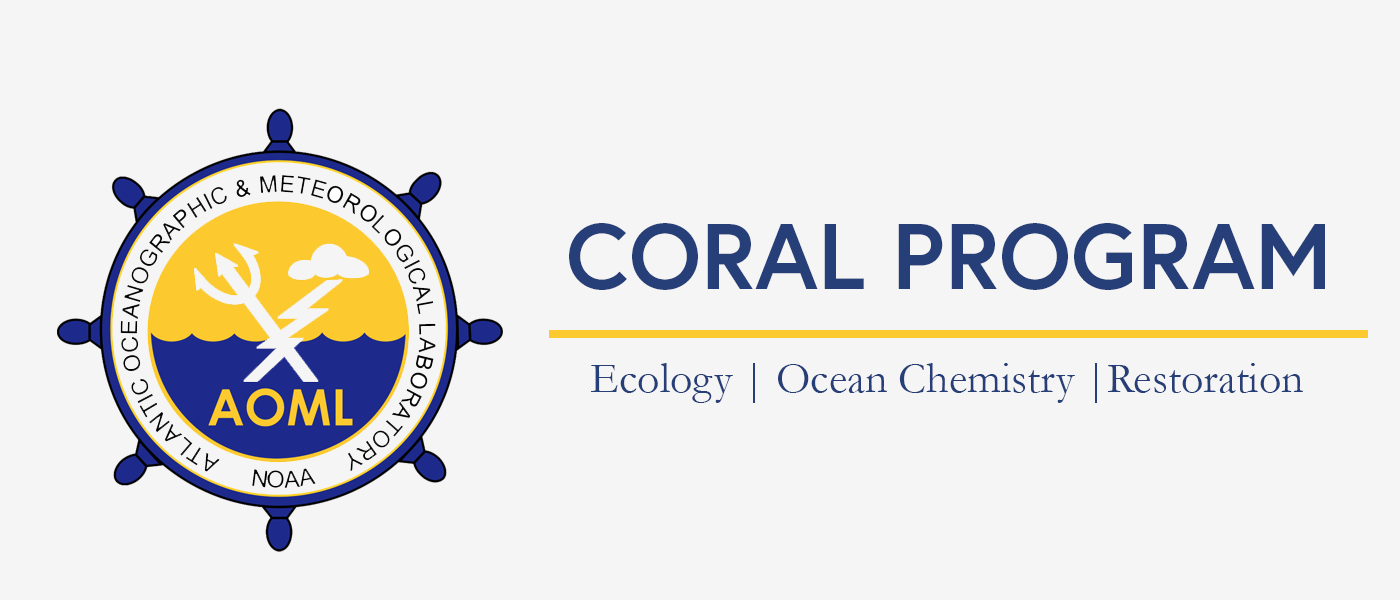
<style>
.page{position:relative;width:1400px;height:600px;background:#f5f5f5}
.page>*{position:absolute;margin:0}
.t1{font:93px "Europa-Bold";color:#263f78}
.t2{font:44px "Garamond";color:#263f78}
</style>
<div class="page">
<p class="t1" style="left:569px;top:223px;width:756px;height:67px">CORAL PROGRAM</p>
<p class="t2" style="left:591px;top:363px;width:712px;height:40px">Ecology | Ocean Chemistry |Restoration</p>
</div>
